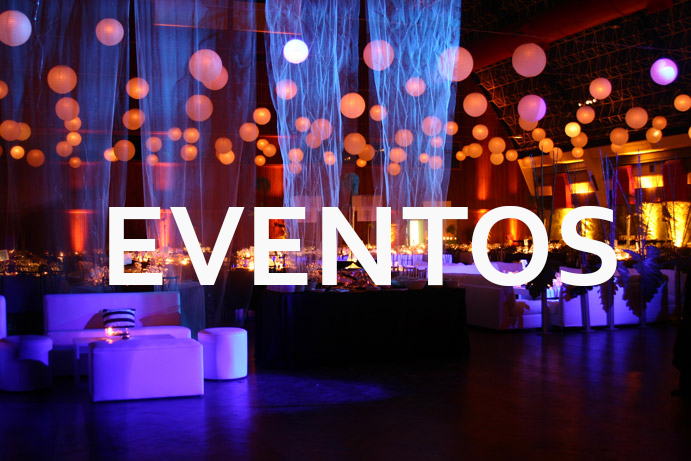
<style>
.page{position:relative;width:691px;height:461px}
.page>*{position:absolute;margin:0}
.t1{font:120px "Corbel-Bold";color:#f9f9f9}
</style>
<div class="page">
<p class="t1" style="left:109px;top:206px;width:508px;height:80px">EVENTOS</p>
</div>
